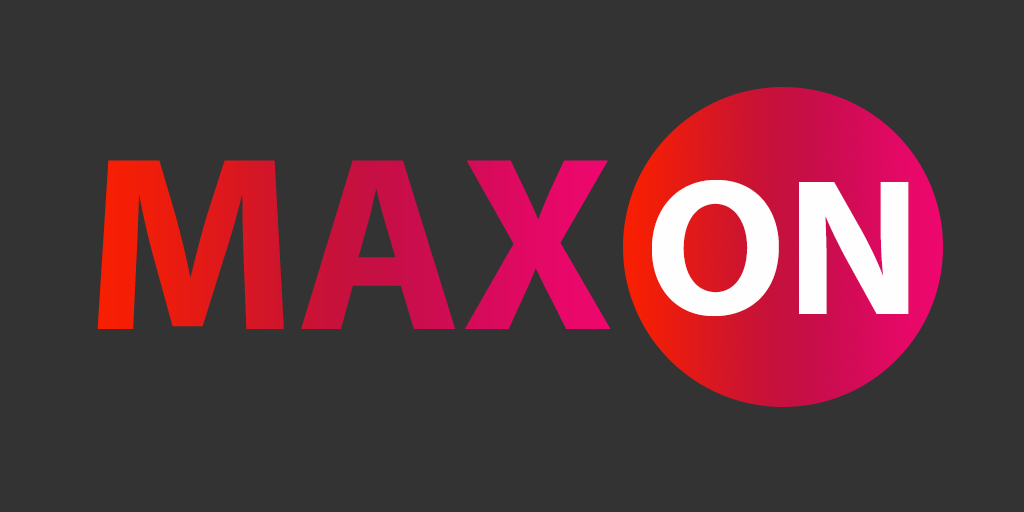
<style>
.page{position:relative;width:1024px;height:512px;background:#333333}
.page>*{position:absolute;margin:0}
.t1{font:250px "MyriadPro-Bold"}
.t2{font:196px "MyriadPro-Bold";color:#fefefe}
</style>
<div class="page">
<p class="t1" style="left:97px;top:160px;width:514px;height:169px">MAX</p>
<p class="t2" style="left:652px;top:180px;width:257px;height:137px">ON</p>
</div>
